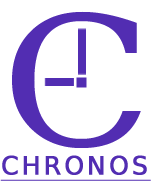
<style>
.page{position:relative;width:151px;height:189px;background:#ffffff}
.page>*{position:absolute;margin:0}
.t1{font:25px "DejaVuSans";letter-spacing:0.1em;color:#522db2;font-weight:bold;text-decoration:underline}
</style>
<div class="page">
<p class="t1" style="left:0px;top:155px;width:151px;height:26px">CHRONOS</p>
</div>
